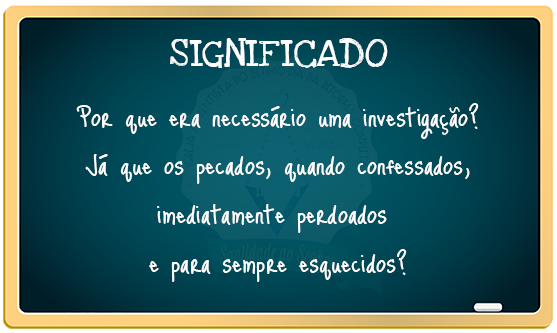
<style>
.page{position:relative;width:557px;height:333px}
.page>*{position:absolute;margin:0}
.t1{font:28.7px "LoveYaLikeASister";color:#ffffff}
.t2{font:40.5px "JustMeAgainDownHere";color:#ffffff}
</style>
<div class="page">
<p class="t1" style="left:170px;top:38px;width:218px;height:30px">SIGNIFICADO</p>
<p class="t2" style="left:76px;top:103px;width:403px;height:179px;text-align:center">Por que era necessário uma investigação?<br> Já que os pecados, quando confessados, <br>imediatamente perdoados <br>e para sempre esquecidos?</p>
</div>
